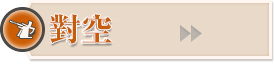
<style>
.page{position:relative;width:274px;height:66px;background:#e8d9c9}
.page>*{position:absolute;margin:0}
.t1{font:32px "RyuminPr6N-ExBold";color:#c45e0c}
</style>
<div class="page">
<p class="t1" style="left:50px;top:14px;width:62px;height:30px">對空</p>
</div>
